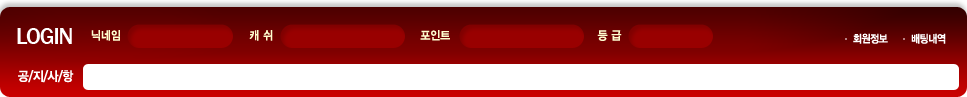
<style>
.page{position:relative;width:967px;height:97px;background:#ffffff}
.page>*{position:absolute;margin:0}
.t1{font:23.2px "FranklinGothic-Medium";letter-spacing:-0.05em;color:#ffffff}
.t2{font:12px "YDIYGO340";color:#fffed0;scale:0.9 1}
.t3{font:11px "YDIYGO340";letter-spacing:-0.05em;color:#ffffff;scale:0.9 1}
.t4{font:13px "YDIYGO340";letter-spacing:-0.05em;color:#ffffff;scale:0.9 1}
</style>
<div class="page">
<p class="t1" style="left:17px;top:28px;width:55px;height:16px">LOGIN</p>
<p class="t2" style="left:91px;top:30px;width:531px;height:11px">닉네임                                  캐 쉬                                       포인트                                       등 급</p>
<p class="t3" style="left:853px;top:33px;width:93px;height:11px">회원정보        배팅내역</p>
<p class="t4" style="left:18px;top:70px;width:56px;height:13px">공/지/사/항</p>
</div>
